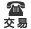
<style>
.page{position:relative;width:31px;height:29px;background:#ffffff}
.page>*{position:absolute;margin:0}
.t1{font:10.5px "MicrosoftYaHei";letter-spacing:0.24em;color:#333333;font-weight:bold}
</style>
<div class="page">
<p class="t1" style="left:4px;top:17px;width:24px;height:12px">交易</p>
</div>
